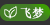
<style>
.page{position:relative;width:50px;height:25px;background:#333333}
.page>*{position:absolute;margin:0}
.t1{font:12px "SimSun";letter-spacing:-0.03em;color:#ffffff;font-weight:bold}
</style>
<div class="page">
<p class="t1" style="left:20px;top:7px;width:24px;height:12px">飞梦</p>
</div>
